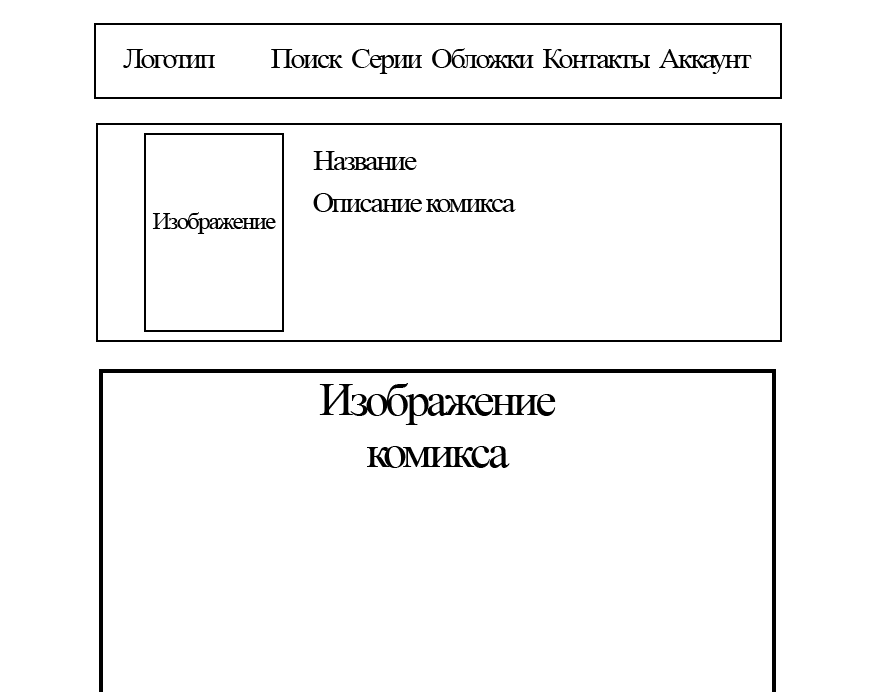
<style>
.page{position:relative;width:875px;height:692px;background:#ffffff}
.page>*{position:absolute;margin:0}
.t1{font:28.5px "TimesNewRomanPSMT";letter-spacing:-0.075em;color:#000000;scale:1.05 1}
.t2{font:23.8px "TimesNewRomanPSMT";letter-spacing:-0.075em;color:#000000;scale:1.05 1}
.t3{font:45.6px/12.9px "TimesNewRomanPSMT";letter-spacing:-0.075em;color:#000000;scale:1.05 1}
</style>
<div class="page">
<p class="t1" style="left:123px;top:48px;width:629px;height:26px">Логотип           Поиск  Серии  Обложки  Контакты  Аккаунт</p>
<p class="t1" style="left:313px;top:151px;width:104px;height:19px">Название</p>
<p class="t1" style="left:313px;top:193px;width:203px;height:19px">Описание комикса</p>
<p class="t2" style="left:152px;top:212px;width:124px;height:22px">Изображение</p>
<p class="t3" style="left:319px;top:383px;width:237px;height:85px;text-align:center">Изображение<br><br><br><br>комикса</p>
</div>
